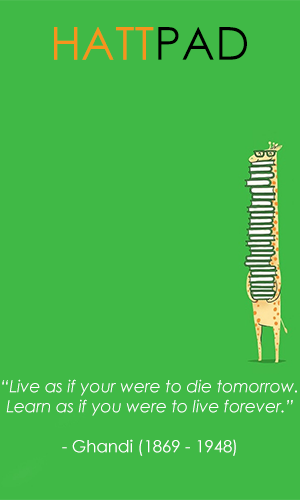
<style>
.page{position:relative;width:300px;height:500px;background:#40b946}
.page>*{position:absolute;margin:0}
.t1{font:45.8px "CenturyGothic";color:#f7931d}
.t2{font:45.8px "CenturyGothic";color:#000000}
.t3{font:16.7px "CenturyGothic-Italic";color:#ffffff}
.t4{font:16.7px "CenturyGothic";color:#ffffff}
</style>
<div class="page">
<p class="t1" style="left:54px;top:27px;width:193px;height:33px">HATT<span class="t2">PAD</span></p>
<p class="t3" style="left:2px;top:379px;width:295px;height:77px;text-align:center">“Live as if your were to die tomorrow. Learn as if you were to live forever.”<br><br><span class="t4">- Ghandi (1869 - 1948)</span></p>
</div>
